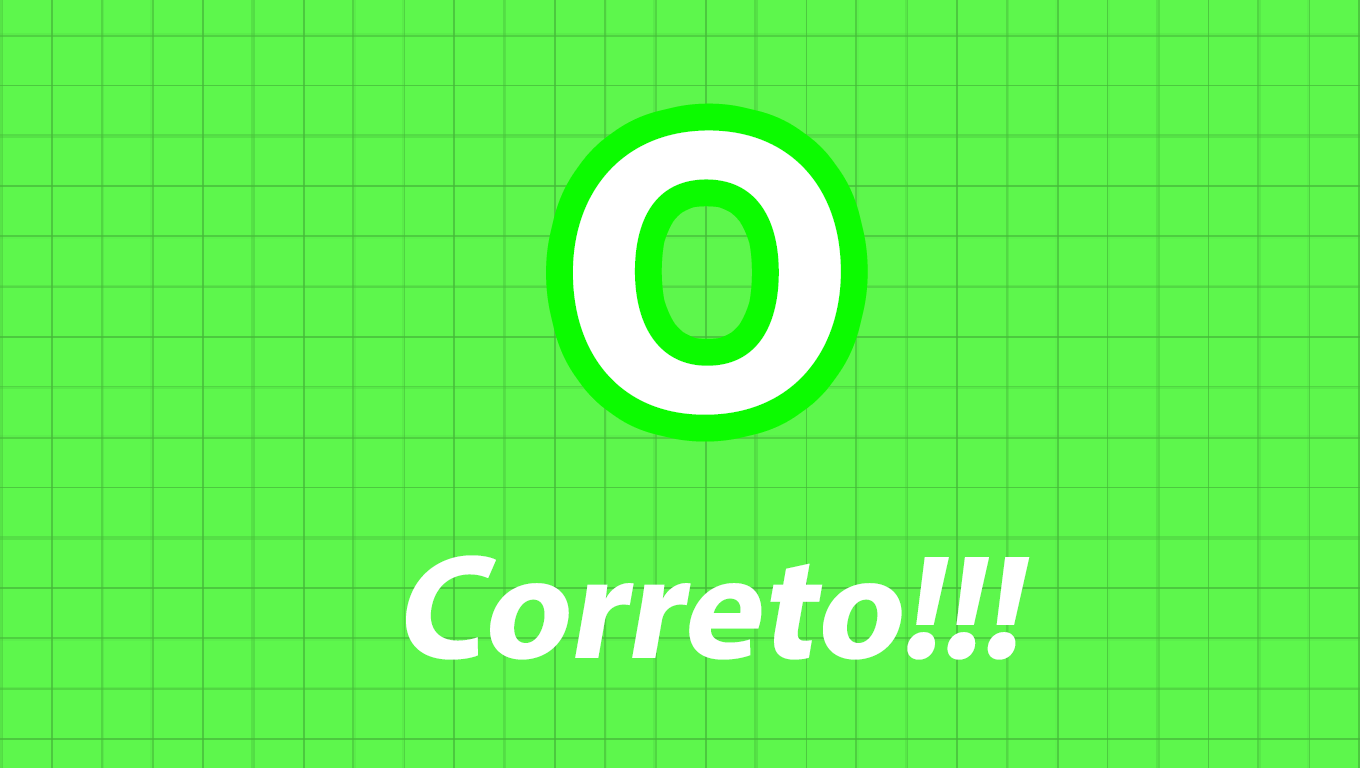
<style>
.page{position:relative;width:1360px;height:768px;background:#5df74c}
.page>*{position:absolute;margin:0}
.t1{font:400px "AcuminConcept-Bold";color:#ffffff;font-style:italic}
.t2{font:150px "MyriadPro-Bold";color:#ffffff;font-style:italic}
</style>
<div class="page">
<p class="t1" style="left:573px;top:130px;width:268px;height:285px">O</p>
<p class="t2" style="left:406px;top:555px;width:624px;height:105px">!!!Correto</p>
</div>
